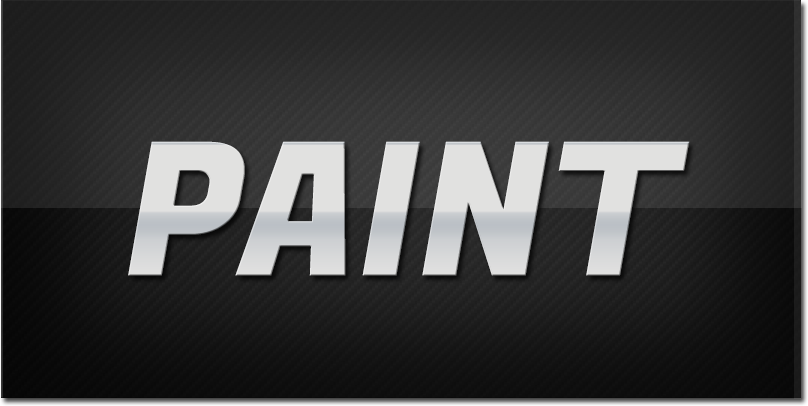
<style>
.page{position:relative;width:808px;height:406px}
.page>*{position:absolute;margin:0}
.t1{font:185.2px "FugazOne-Regular";color:#dfdfdf}
</style>
<div class="page">
<p class="t1" style="left:128px;top:141px;width:562px;height:135px">PAINT</p>
</div>
